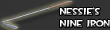
<style>
.page{position:relative;width:110px;height:30px;background:#333333}
.page>*{position:absolute;margin:0}
.t1{font:10px "TF2Build";color:#fefefe}
</style>
<div class="page">
<p class="t1" style="left:60px;top:7px;width:50px;height:20px">Nessie’s<br>nine iron</p>
</div>
